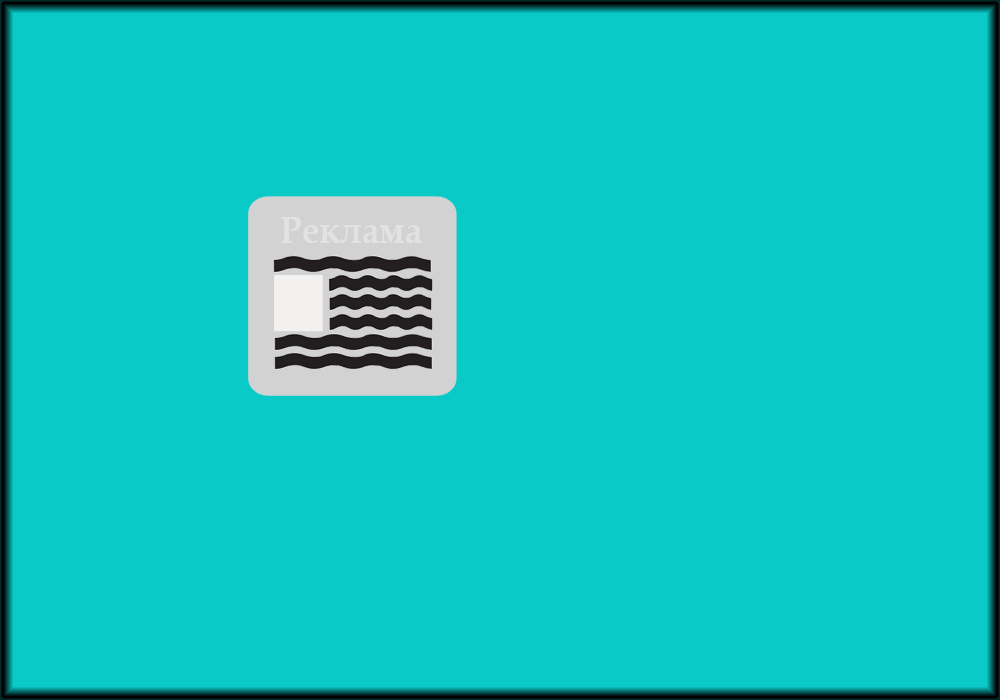
<style>
.page{position:relative;width:1000px;height:700px;background:#09cac7}
.page>*{position:absolute;margin:0}
.t1{font:38px "BookAntiqua-Bold";color:#e2e2e2;scale:0.92 1}
</style>
<div class="page">
<p class="t1" style="left:281px;top:217px;width:141px;height:26px">Реклама</p>
</div>
